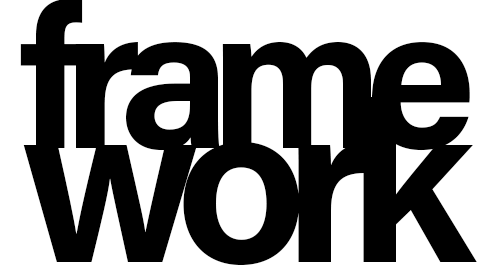
<style>
.page{position:relative;width:498px;height:265px;background:#ffffff}
.page>*{position:absolute;margin:0}
.t1{font:200px/122px "AcuminPro-Bold";letter-spacing:-0.1em;color:#000000}
.t2{font:225px/114px "AcuminPro-Bold";letter-spacing:-0.1em;color:#000000}
</style>
<div class="page">
<p class="t1" style="left:20px;top:0px;width:457px;height:266px;text-align:center">frame<br><span class="t2">work</span></p>
</div>
